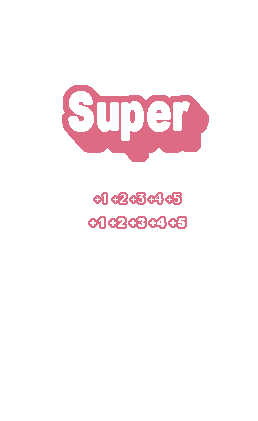
<style>
.page{position:relative;width:258px;height:421px;background:#ffffff}
.page>*{position:absolute;margin:0}
.t1{font:52.4px "Arial-Black";color:#f6eeec;scale:0.7 1}
.t2{font:52.4px "Arial-Black";letter-spacing:0.06em;color:#f6eeec;scale:0.7 1}
.t3{font:52.4px "Arial-Black";letter-spacing:0.02em;color:#f6eeec;scale:0.7 1}
.t4{font:12px "Silom";color:#f6eeec}
.t5{font:12px "Arial-Black";color:#f6eeec}
</style>
<div class="page">
<p class="t1" style="left:69px;top:92px;width:120px;height:48px">Su<span class="t2">p</span><span class="t3">e</span>r</p>
<p class="t4" style="left:95px;top:194px;width:85px;height:9px">+1 +2 +3 +4 +5</p>
<p class="t5" style="left:90px;top:218px;width:95px;height:9px">+1 +2 +3 +4 +5</p>
</div>
